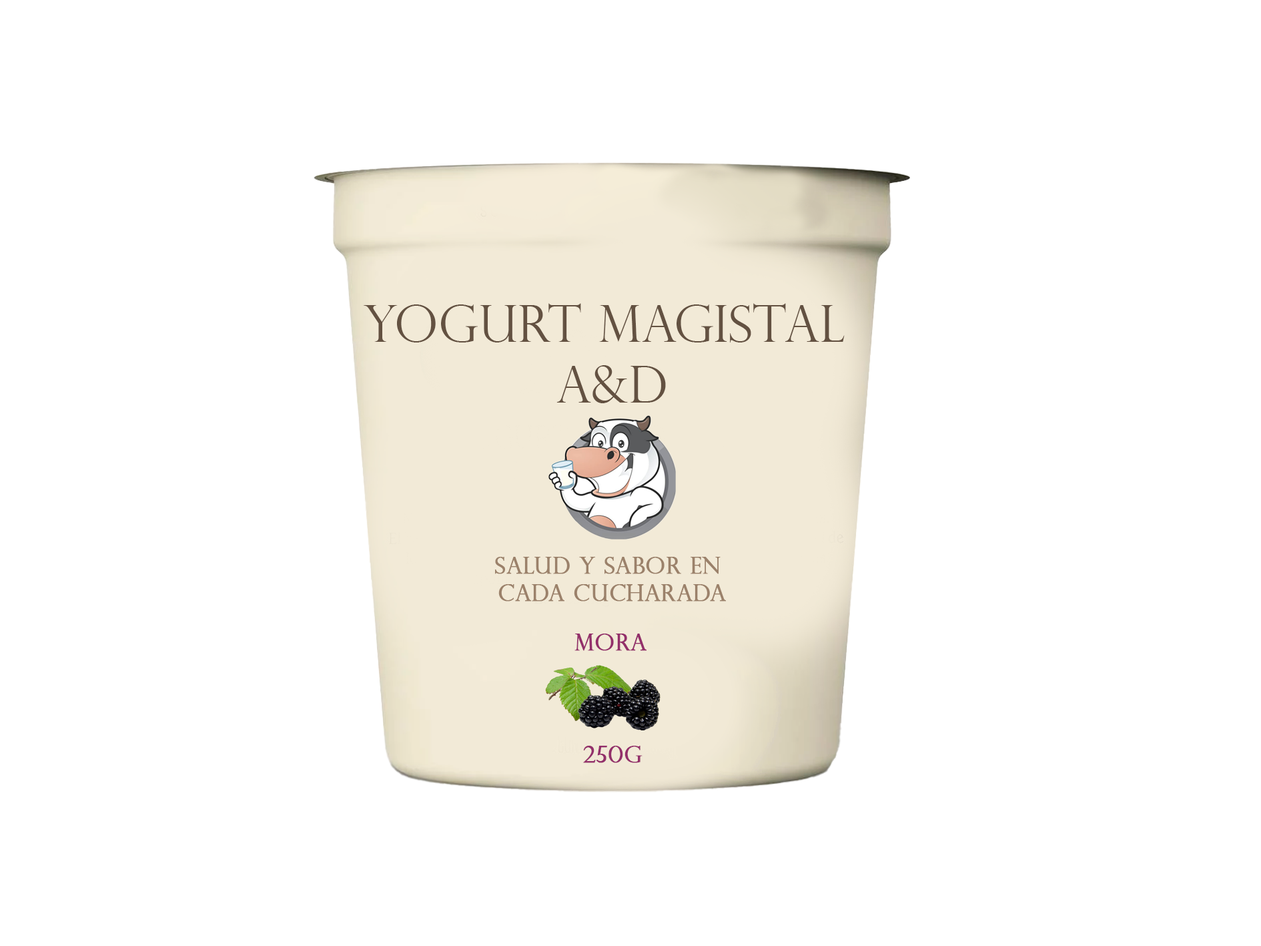
<style>
.page{position:relative;width:1261px;height:946px;background:#ffffff}
.page>*{position:absolute;margin:0}
.t1{font:50.8px "PerpetuaTitlingMT-Light";color:#635141}
.t2{font:22.9px "PerpetuaTitlingMT-Light";color:#9b816a;font-weight:bold}
.t3{font:22.9px "PerpetuaTitlingMT-Light";color:#932f6a;font-weight:bold}
</style>
<div class="page">
<p class="t1" style="left:363px;top:303px;width:482px;height:100px;text-align:center">Yogurt Magistal <br>A&amp;D</p>
<p class="t2" style="left:495px;top:557px;width:231px;height:44px;text-align:center">salud y sabor en <br>cada cucharada</p>
<p class="t3" style="left:575px;top:633px;width:72px;height:18px">Mora</p>
<p class="t3" style="left:583px;top:745px;width:60px;height:18px">250g</p>
</div>
